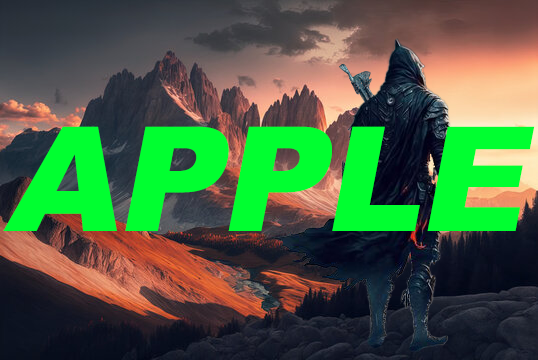
<style>
.page{position:relative;width:538px;height:360px}
.page>*{position:absolute;margin:0}
.t1{font:145.2px "Arial-Black";letter-spacing:-0.01em;color:#00ff30;font-style:italic}
</style>
<div class="page">
<p class="t1" style="left:3px;top:126px;width:532px;height:105px">APPLE</p>
</div>
